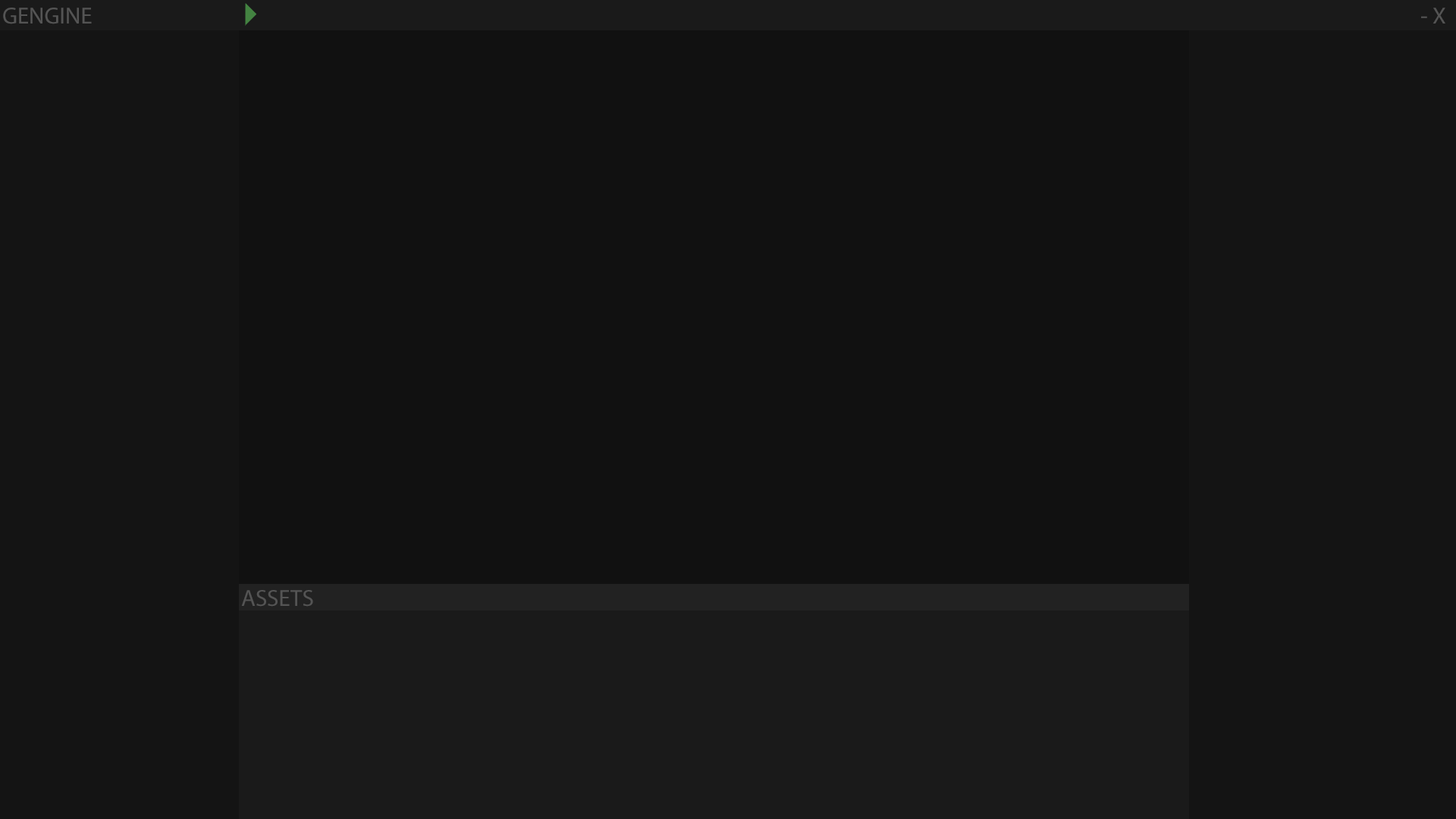
<style>
.page{position:relative;width:1456px;height:819px;background:#111111}
.page>*{position:absolute;margin:0}
.t1{font:23.5px "MyriadPro-Regular";color:#545454}
</style>
<div class="page">
<p class="t1" style="left:3px;top:8px;width:89px;height:16px">GENGINE</p>
<p class="t1" style="left:1421px;top:8px;width:24px;height:16px">- X</p>
<p class="t1" style="left:241px;top:590px;width:72px;height:17px">ASSETS</p>
</div>
